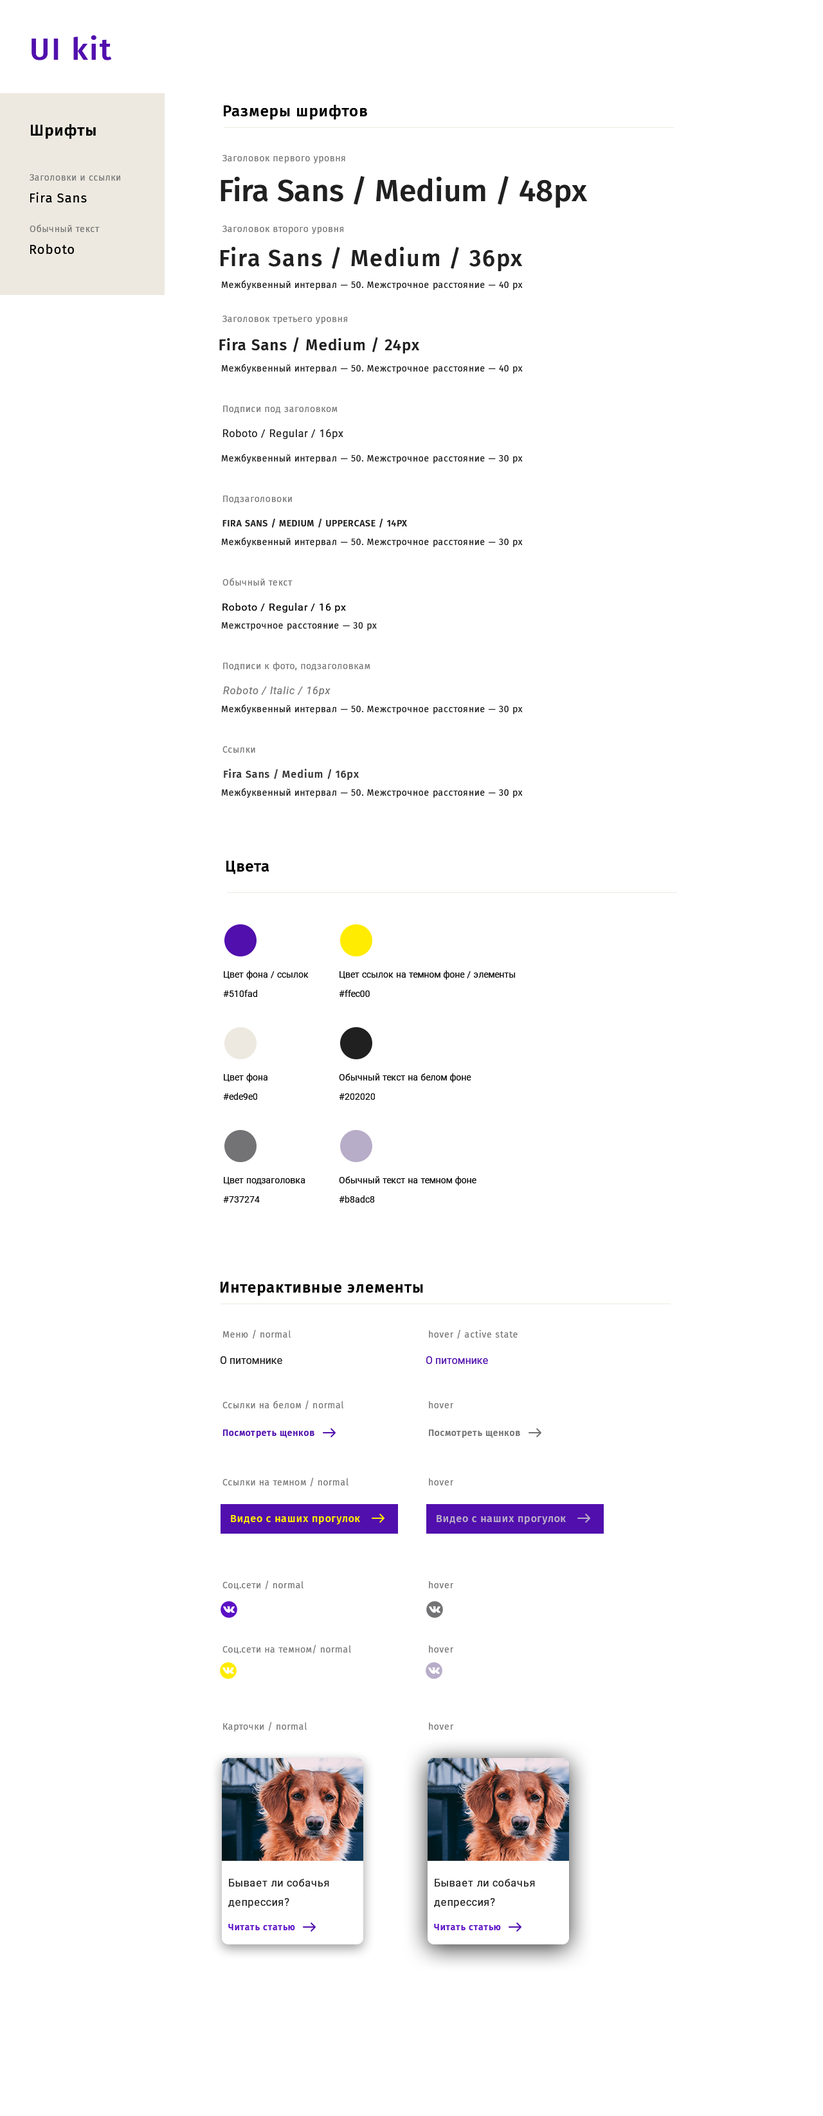
<style>
.page{position:relative;width:823px;height:2116px;background:#ffffff}
.page>*{position:absolute;margin:0}
.t1{font:30.9px "FiraSans-Medium";letter-spacing:0.05em;color:#510fad}
.t2{font:15.4px "FiraSans-Medium";letter-spacing:0.05em;color:#000000}
.t3{font:9px "FiraSans-Regular";letter-spacing:0.05em;color:#797979}
.t4{font:30.9px "FiraSans-Medium";color:#202020}
.t5{font:12.9px "FiraSans-Regular";letter-spacing:0.05em;color:#000000}
.t6{font:23.1px "FiraSans-Medium";letter-spacing:0.05em;color:#202020}
.t7{font:9px "FiraSans-Regular";letter-spacing:0.05em;color:#202020}
.t8{font:15.4px "FiraSans-Medium";letter-spacing:0.05em;color:#202020}
.t9{font:10.3px "Roboto-Regular";letter-spacing:0.05em;color:#202020}
.t10{font:9px "FiraSans-Medium";letter-spacing:0.05em;color:#202020;text-transform:uppercase}
.t11{font:10.3px "Roboto-Regular";letter-spacing:0.05em;color:#000000}
.t12{font:10.3px "Roboto-Italic";letter-spacing:0.05em;color:#737274}
.t13{font:10.3px "FiraSans-Medium";letter-spacing:0.05em;color:#3c3b3c}
.t14{font:9px "Roboto-Regular";color:#0a0a0c}
.t15{font:10.3px "Roboto-Regular";color:#202020}
.t16{font:10.3px "Roboto-Regular";color:#510fad}
.t17{font:9px "FiraSans-Medium";letter-spacing:0.05em;color:#510fad}
.t18{font:9px "FiraSans-Medium";letter-spacing:0.05em;color:#737274}
.t19{font:10.3px "FiraSans-Medium";letter-spacing:0.05em;color:#ffec00}
.t20{font:10.3px "FiraSans-Medium";letter-spacing:0.05em;color:#b8adc8}
.t21{font:10.3px/19.3px "Roboto-Regular";letter-spacing:0.05em;color:#202020}
.t22{font:9px "FiraSans-Medium";letter-spacing:0.05em;color:#5c11c5}
</style>
<div class="page">
<p class="t1" style="left:32px;top:35px;width:80px;height:25px">UI kit</p>
<p class="t2" style="left:224px;top:105px;width:143px;height:15px">Размеры шрифтов</p>
<p class="t2" style="left:31px;top:124px;width:65px;height:15px">Шрифты</p>
<p class="t3" style="left:222px;top:155px;width:123px;height:9px">Заголовок первого уровня</p>
<p class="t3" style="left:30px;top:174px;width:90px;height:7px">Заголовки и ссылки</p>
<p class="t4" style="left:221px;top:176px;width:367px;height:32px">Fira Sans / Medium / 48px</p>
<p class="t5" style="left:30px;top:192px;width:57px;height:11px">Fira Sans</p>
<p class="t3" style="left:30px;top:224px;width:70px;height:8px">Обычный текст</p>
<p class="t3" style="left:222px;top:226px;width:121px;height:9px">Заголовок второго уровня</p>
<p class="t5" style="left:30px;top:244px;width:44px;height:10px">Roboto</p>
<p class="t6" style="left:221px;top:247px;width:302px;height:24px">Fira Sans / Medium / 36px</p>
<p class="t7" style="left:221px;top:280px;width:302px;height:11px">Межбуквенный интервал — 50. Межстрочное расстояние — 40 px</p>
<p class="t3" style="left:222px;top:316px;width:125px;height:9px">Заголовок третьего уровня</p>
<p class="t8" style="left:219px;top:337px;width:200px;height:17px">Fira Sans / Medium / 24px</p>
<p class="t7" style="left:221px;top:364px;width:302px;height:10px">Межбуквенный интервал — 50. Межстрочное расстояние — 40 px</p>
<p class="t3" style="left:223px;top:406px;width:115px;height:7px">Подписи под заголовком</p>
<p class="t9" style="left:223px;top:429px;width:120px;height:10px">Roboto / Regular / 16px</p>
<p class="t7" style="left:221px;top:454px;width:302px;height:10px">Межбуквенный интервал — 50. Межстрочное расстояние — 30 px</p>
<p class="t3" style="left:223px;top:496px;width:69px;height:7px">Подзаголовоки</p>
<p class="t10" style="left:222px;top:518px;width:185px;height:10px">Fira Sans / Medium / Uppercase / 14px</p>
<p class="t7" style="left:221px;top:537px;width:302px;height:11px">Межбуквенный интервал — 50. Межстрочное расстояние — 30 px</p>
<p class="t3" style="left:222px;top:578px;width:70px;height:8px">Обычный текст</p>
<p class="t11" style="left:222px;top:603px;width:124px;height:10px">Roboto / Regular / 16 px</p>
<p class="t7" style="left:221px;top:622px;width:156px;height:9px">Межстрочное расстояние — 30 px</p>
<p class="t3" style="left:223px;top:662px;width:147px;height:9px">Подписи к фото, подзаголовкам</p>
<p class="t12" style="left:223px;top:687px;width:107px;height:9px">Roboto / Italic / 16px</p>
<p class="t7" style="left:221px;top:705px;width:302px;height:10px">Межбуквенный интервал — 50. Межстрочное расстояние — 30 px</p>
<p class="t3" style="left:222px;top:746px;width:33px;height:7px">Ссылки</p>
<p class="t13" style="left:224px;top:769px;width:135px;height:11px">Fira Sans / Medium / 16px</p>
<p class="t7" style="left:221px;top:788px;width:302px;height:10px">Межбуквенный интервал — 50. Межстрочное расстояние — 30 px</p>
<p class="t2" style="left:226px;top:861px;width:43px;height:13px">Цвета</p>
<p class="t14" style="left:224px;top:971px;width:85px;height:9px">Цвет фона / ссылок</p>
<p class="t14" style="left:339px;top:971px;width:176px;height:9px">Цвет ссылок на темном фоне / элементы</p>
<p class="t14" style="left:223px;top:990px;width:34px;height:7px">#510fad</p>
<p class="t14" style="left:339px;top:990px;width:31px;height:7px">#ffec00</p>
<p class="t14" style="left:224px;top:1074px;width:43px;height:9px">Цвет фона</p>
<p class="t14" style="left:339px;top:1074px;width:132px;height:9px">Обычный текст на белом фоне</p>
<p class="t14" style="left:223px;top:1093px;width:34px;height:7px">#ede9e0</p>
<p class="t14" style="left:339px;top:1094px;width:36px;height:6px">#202020</p>
<p class="t14" style="left:224px;top:1177px;width:81px;height:8px">Цвет подзаголовка</p>
<p class="t14" style="left:339px;top:1176px;width:137px;height:9px">Обычный текст на темном фоне</p>
<p class="t14" style="left:223px;top:1196px;width:37px;height:7px">#737274</p>
<p class="t14" style="left:339px;top:1196px;width:36px;height:7px">#b8adc8</p>
<p class="t2" style="left:221px;top:1282px;width:202px;height:14px">Интерактивные элементы</p>
<p class="t3" style="left:222px;top:1330px;width:69px;height:9px">Меню / normal</p>
<p class="t3" style="left:429px;top:1330px;width:89px;height:9px">hover / active state</p>
<p class="t15" style="left:221px;top:1356px;width:61px;height:8px">О питомнике</p>
<p class="t16" style="left:426px;top:1356px;width:62px;height:8px">О питомнике</p>
<p class="t3" style="left:222px;top:1401px;width:122px;height:9px">Ссылки на белом / normal</p>
<p class="t3" style="left:429px;top:1401px;width:24px;height:7px">hover</p>
<p class="t17" style="left:223px;top:1430px;width:91px;height:8px">Посмотреть щенков</p>
<p class="t18" style="left:429px;top:1430px;width:91px;height:8px">Посмотреть щенков</p>
<p class="t3" style="left:222px;top:1478px;width:126px;height:9px">Ссылки на темном / normal</p>
<p class="t3" style="left:429px;top:1478px;width:24px;height:8px">hover</p>
<p class="t19" style="left:231px;top:1515px;width:129px;height:10px">Видео с наших прогулок</p>
<p class="t20" style="left:437px;top:1515px;width:129px;height:10px">Видео с наших прогулок</p>
<p class="t3" style="left:222px;top:1581px;width:81px;height:9px">Соц.сети / normal</p>
<p class="t3" style="left:429px;top:1581px;width:24px;height:8px">hover</p>
<p class="t3" style="left:222px;top:1645px;width:129px;height:9px">Соц.сети на темном/ normal</p>
<p class="t3" style="left:429px;top:1645px;width:24px;height:8px">hover</p>
<p class="t3" style="left:223px;top:1722px;width:84px;height:10px">Карточки / normal</p>
<p class="t3" style="left:429px;top:1722px;width:24px;height:8px">hover</p>
<p class="t21" style="left:228px;top:1879px;width:101px;height:29px">Бывает ли собачья депрессия?</p>
<p class="t21" style="left:434px;top:1879px;width:101px;height:29px">Бывает ли собачья депрессия?</p>
<p class="t22" style="left:228px;top:1924px;width:67px;height:7px">Читать статью</p>
<p class="t22" style="left:434px;top:1924px;width:67px;height:7px">Читать статью</p>
</div>
